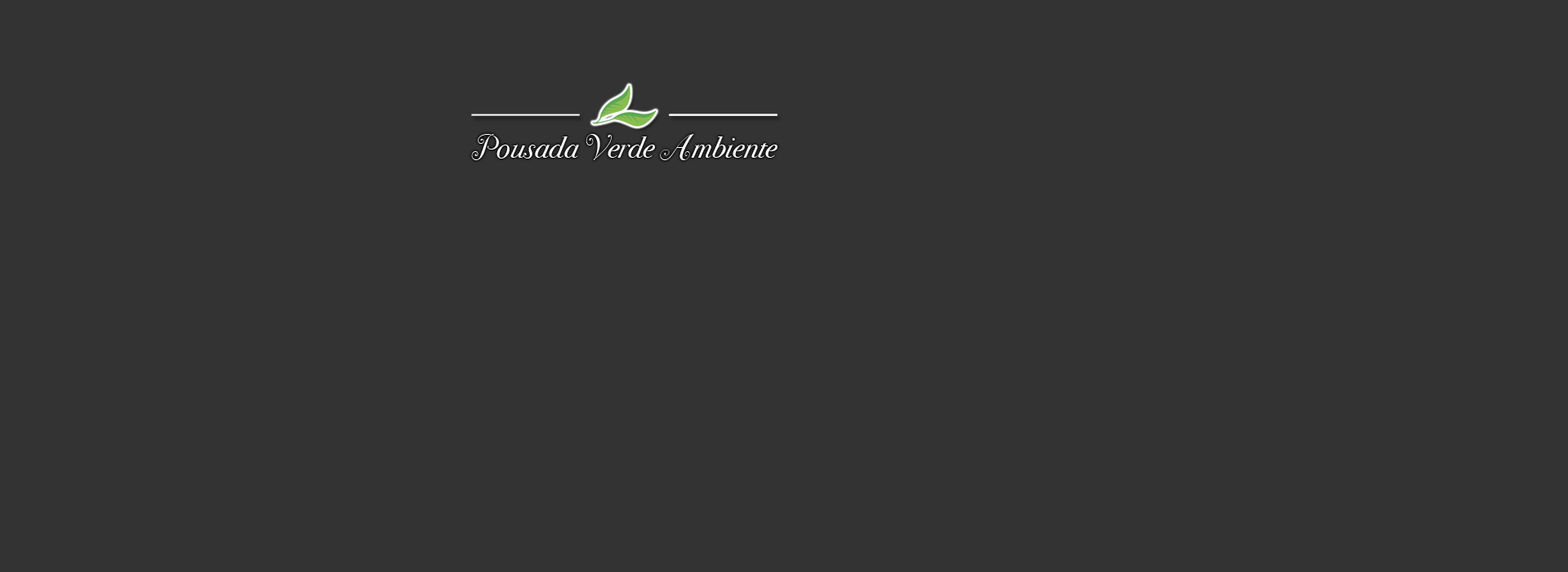
<style>
.page{position:relative;width:1568px;height:572px;background:#333333}
.page>*{position:absolute;margin:0}
.t1{font:29.4px "BodoniSvtyTwoSwaITCTTBookIt";color:#ffffff}
</style>
<div class="page">
<p class="t1" style="left:471px;top:134px;width:306px;height:26px">Pousada Verde Ambiente</p>
</div>
